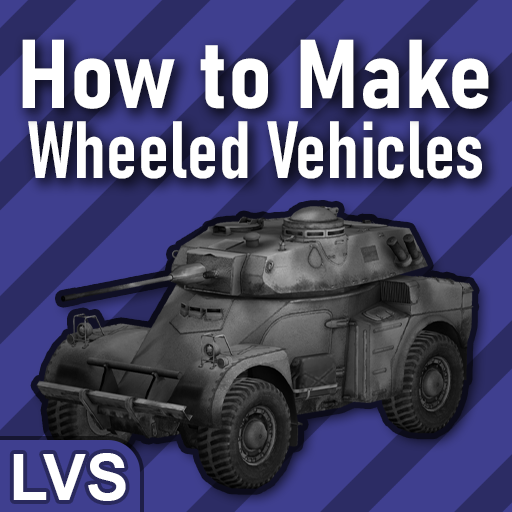
<style>
.page{position:relative;width:512px;height:512px;background:#3f3f8f}
.page>*{position:absolute;margin:0}
.t1{font:96px "Bahnschrift-BoldSemiCondensed";color:#ffffff}
.t2{font:80px "Bahnschrift-SemiBoldCondensed";color:#ffffff}
.t3{font:64px "Arial-BoldMT";color:#ffffff}
</style>
<div class="page">
<p class="t1" style="left:22px;top:39px;width:467px;height:70px">How to Make</p>
<p class="t2" style="left:28px;top:121px;width:454px;height:58px">Wheeled Vehicles</p>
<p class="t3" style="left:13px;top:453px;width:113px;height:48px">LVS</p>
</div>
